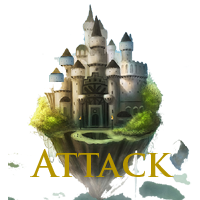
<style>
.page{position:relative;width:200px;height:200px;background:#ffffff}
.page>*{position:absolute;margin:0}
.t1{font:36px "TrajanPro-Bold";color:#b49400}
</style>
<div class="page">
<p class="t1" style="left:30px;top:149px;width:144px;height:28px">Attack</p>
</div>
